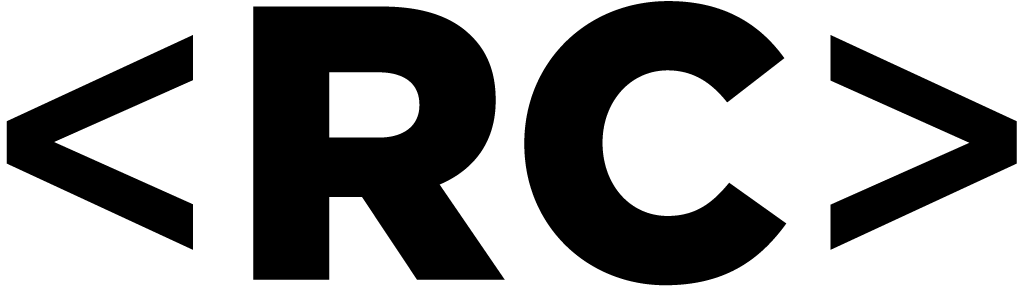
<style>
.page{position:relative;width:1024px;height:288px;background:#ffffff}
.page>*{position:absolute;margin:0}
.t1{font:390px "Gotham-Black";color:#000000}
.t2{font:390px "Gotham-Medium";color:#000000}
</style>
<div class="page">
<p class="t1" style="left:6px;top:1px;width:1011px;height:285px"><span class="t2">&lt;</span>RC<span class="t2">&gt;</span></p>
</div>
